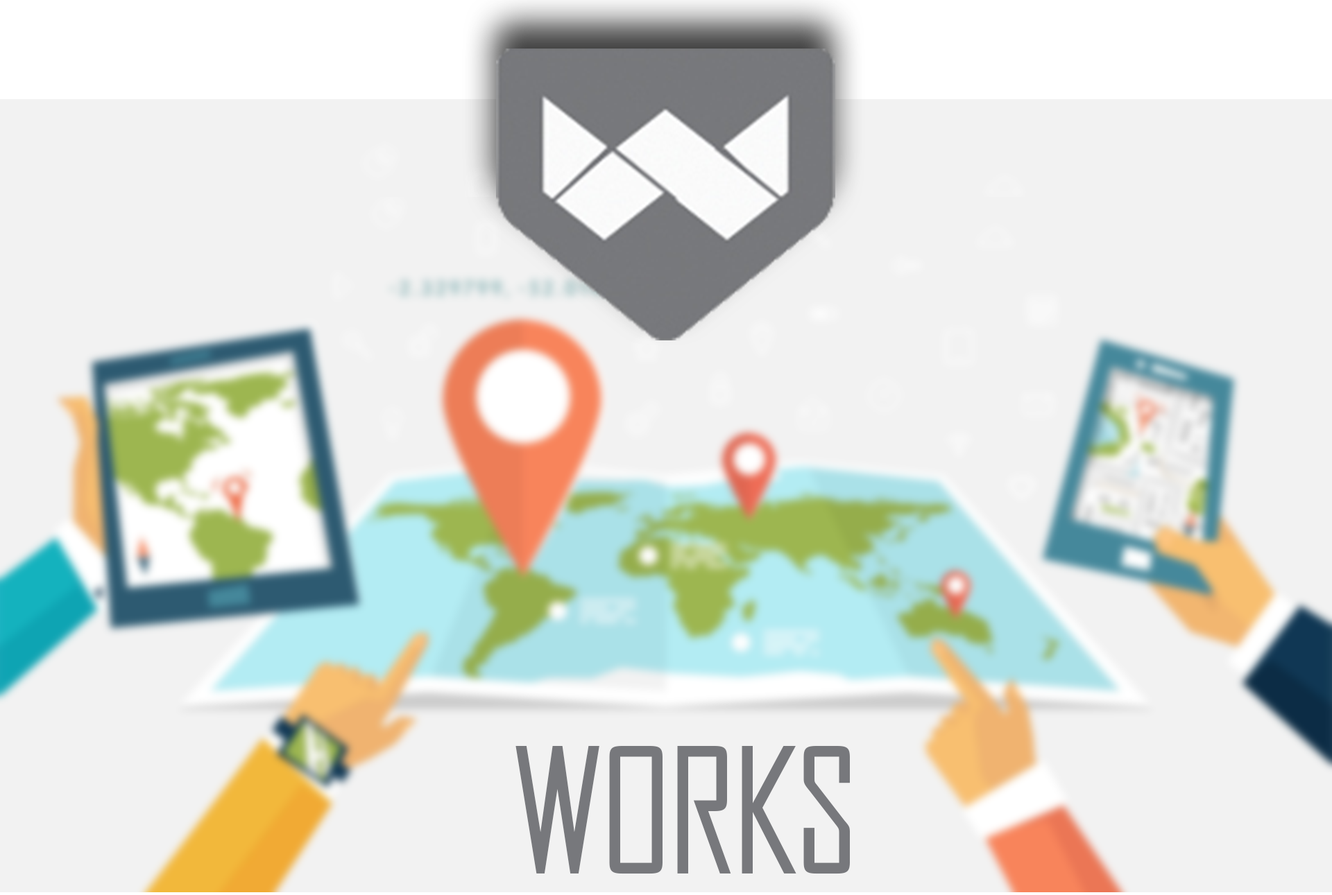
<style>
.page{position:relative;width:1332px;height:895px;background:#f2f2f2}
.page>*{position:absolute;margin:0}
.t1{font:159.6px "OPTIAgency-Gothic";letter-spacing:0.01em;color:#77787c}
</style>
<div class="page">
<p class="t1" style="left:515px;top:746px;width:335px;height:129px">WORKS</p>
</div>
